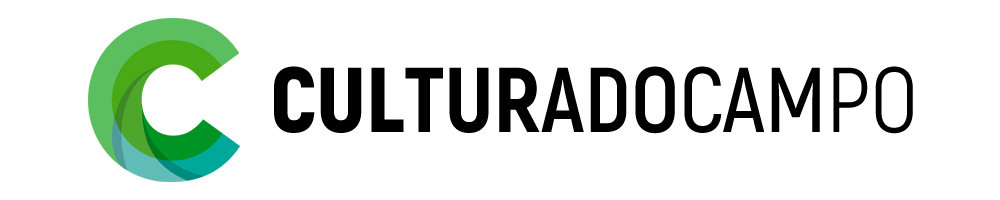
<style>
.page{position:relative;width:1000px;height:200px;background:#ffffff}
.page>*{position:absolute;margin:0}
.t1{font:91.7px "Akrobat-Black";color:#000000;text-transform:uppercase}
.t2{font:91.7px "Akrobat-ExtraBold";color:#000000;text-transform:uppercase}
.t3{font:91.7px "Akrobat-Bold";color:#000000;text-transform:uppercase}
.t4{font:91.7px "Akrobat-SemiBold";color:#000000;text-transform:uppercase}
.t5{font:91.7px "Akrobat-Regular";color:#000000;text-transform:uppercase}
</style>
<div class="page">
<p class="t1" style="left:274px;top:66px;width:639px;height:68px">cul<span class="t2">tur</span><span class="t3">ado</span><span class="t4">cam</span><span class="t5">po</span></p>
</div>
